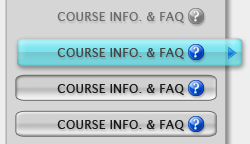
<style>
.page{position:relative;width:250px;height:144px;background:#d6d6d6}
.page>*{position:absolute;margin:0}
.t1{font:12.3px "LucidaSans";letter-spacing:0.006em;color:#6b6b6b}
.t2{font:12.3px "LucidaSans";letter-spacing:0.006em;color:#454545}
.t3{font:12.3px "LucidaSans";letter-spacing:0.006em;color:#191919}
</style>
<div class="page">
<p class="t1" style="left:57px;top:12px;width:127px;height:11px">COURSE INFO. &amp; FAQ</p>
<p class="t2" style="left:57px;top:48px;width:127px;height:11px">COURSE INFO. &amp; FAQ</p>
<p class="t3" style="left:57px;top:84px;width:127px;height:11px">COURSE INFO. &amp; FAQ</p>
<p class="t3" style="left:57px;top:120px;width:127px;height:11px">COURSE INFO. &amp; FAQ</p>
</div>
